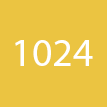
<style>
.page{position:relative;width:107px;height:107px;background:#ebc441}
.page>*{position:absolute;margin:0}
.t1{font:40px "MyriadPro-Regular";color:#ffffff}
</style>
<div class="page">
<p class="t1" style="left:15px;top:40px;width:78px;height:26px">1024</p>
</div>
